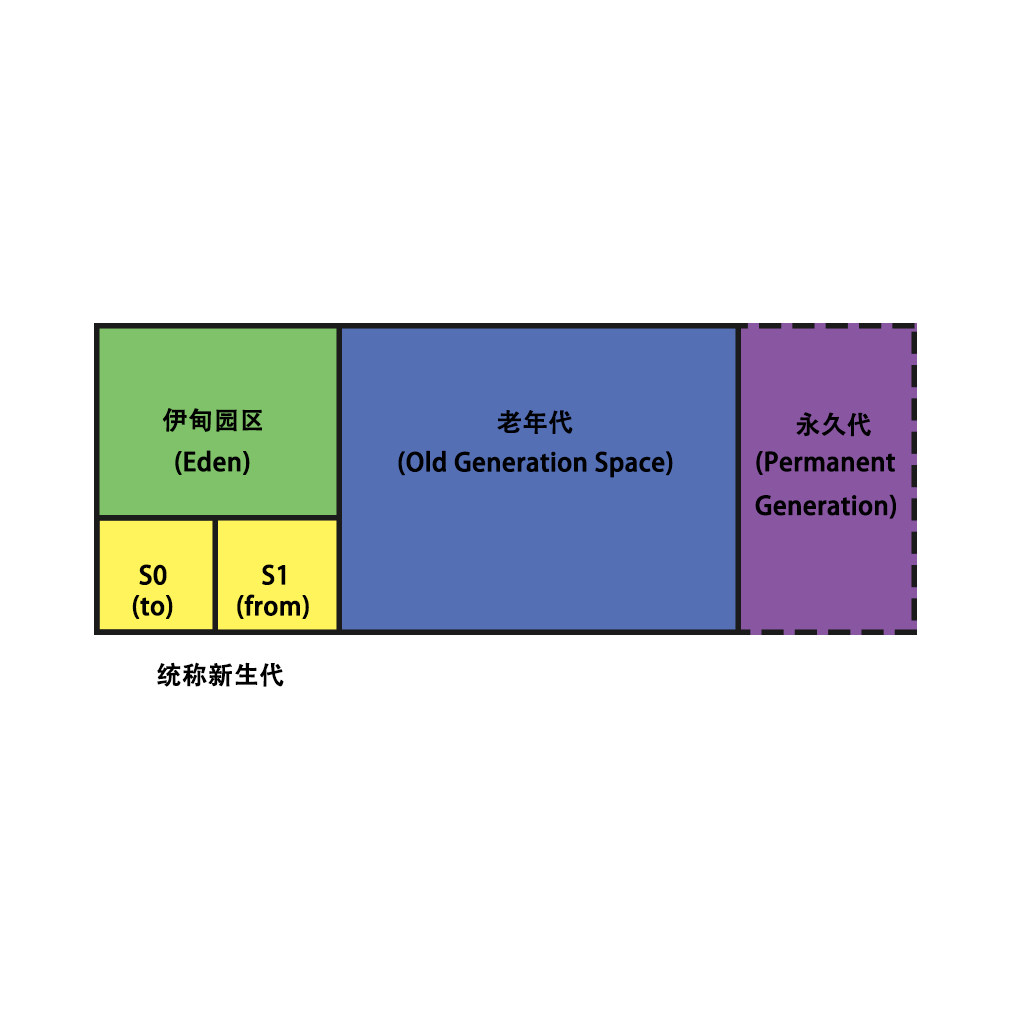
<style>
.page{position:relative;width:1024px;height:1024px;background:#ffffff}
.page>*{position:absolute;margin:0}
.t1{font:25px "AdobeHeitiStd-Regular";color:#000000;font-weight:bold}
</style>
<div class="page">
<p class="t1" style="left:162px;top:408px;width:100px;height:24px">伊甸园区</p>
<p class="t1" style="left:497px;top:410px;width:76px;height:24px">老年代</p>
<p class="t1" style="left:796px;top:412px;width:75px;height:25px">永久代</p>
<p class="t1" style="left:175px;top:450px;width:75px;height:25px">(Eden)</p>
<p class="t1" style="left:398px;top:450px;width:275px;height:28px">(Old Generation Space)</p>
<p class="t1" style="left:755px;top:451px;width:141px;height:68px">(Permanent<br>Generation)</p>
<p class="t1" style="left:139px;top:564px;width:28px;height:21px">S0</p>
<p class="t1" style="left:262px;top:564px;width:24px;height:21px">S1</p>
<p class="t1" style="left:132px;top:595px;width:41px;height:24px">(to)</p>
<p class="t1" style="left:237px;top:594px;width:72px;height:25px">(from)</p>
<p class="t1" style="left:157px;top:662px;width:127px;height:25px">统称新生代</p>
</div>
